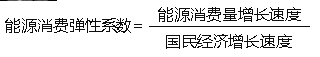
<style>
.page{position:relative;width:320px;height:57px;background:#ffffff}
.page>*{position:absolute;margin:0}
.t1{font:16px "MicrosoftYaHei";letter-spacing:-0.005em;color:#0d0d0d}
</style>
<div class="page">
<p class="t1" style="left:158px;top:7px;width:143px;height:15px">能源消费量增长速度</p>
<p class="t1" style="left:5px;top:18px;width:137px;height:15px">能源消费弹性系数=</p>
<p class="t1" style="left:166px;top:34px;width:126px;height:15px">国民经济增长速度</p>
</div>
